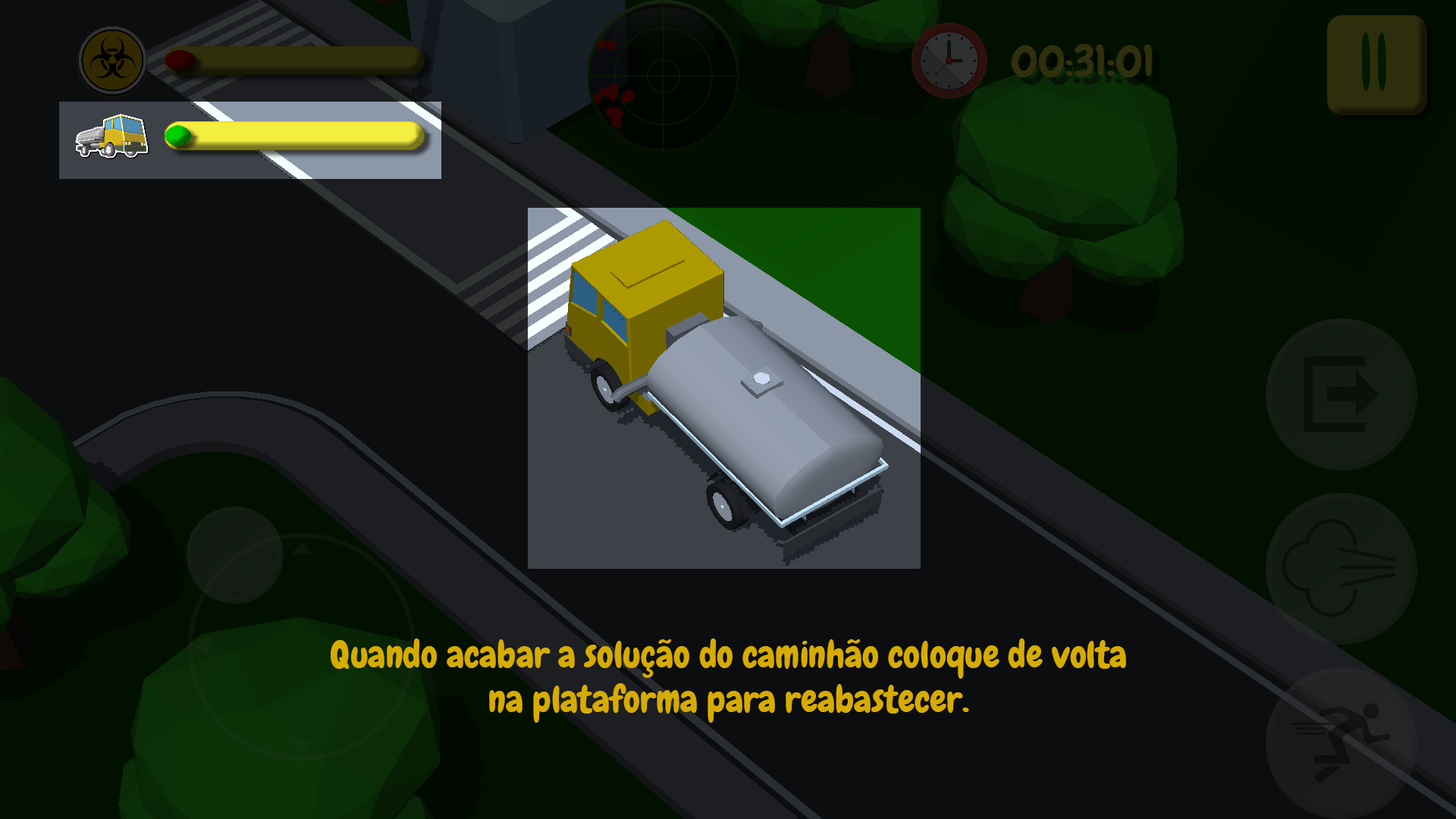
<style>
.page{position:relative;width:1456px;height:819px;background:#0c0d0f}
.page>*{position:absolute;margin:0}
.t1{font:37.1px "Chewy-Regular";color:#d6ac02}
</style>
<div class="page">
<p class="t1" style="left:331px;top:639px;width:795px;height:84px;text-align:center">Quando acabar a solução do caminhão coloque de volta<br>na plataforma para reabastecer.</p>
</div>
